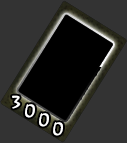
<style>
.page{position:relative;width:127px;height:143px;background:#333333}
.page>*{position:absolute;margin:0}
.t1{font:18px/9px "Borealis";letter-spacing:0.1em;color:#ffffff}
</style>
<div class="page">
<p class="t1" style="left:12px;top:95px;width:51px;height:41px">3<br>  0<br>    0<br>      0</p>
</div>
